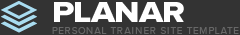
<style>
.page{position:relative;width:240px;height:35px;background:#333333}
.page>*{position:absolute;margin:0}
.t1{font:30.1px "ProximaNova-Extrabld";letter-spacing:-0.025em;color:#ffffff;scale:1.15 1}
.t2{font:9.7px "ProximaNova-Regular";letter-spacing:0.1em;color:#676767;text-transform:uppercase}
</style>
<div class="page">
<p class="t1" style="left:54px;top:2px;width:130px;height:20px">PLANAR</p>
<p class="t2" style="left:52px;top:27px;width:187px;height:7px">PERSONAL TRAINER SITE TEMPLATE</p>
</div>
